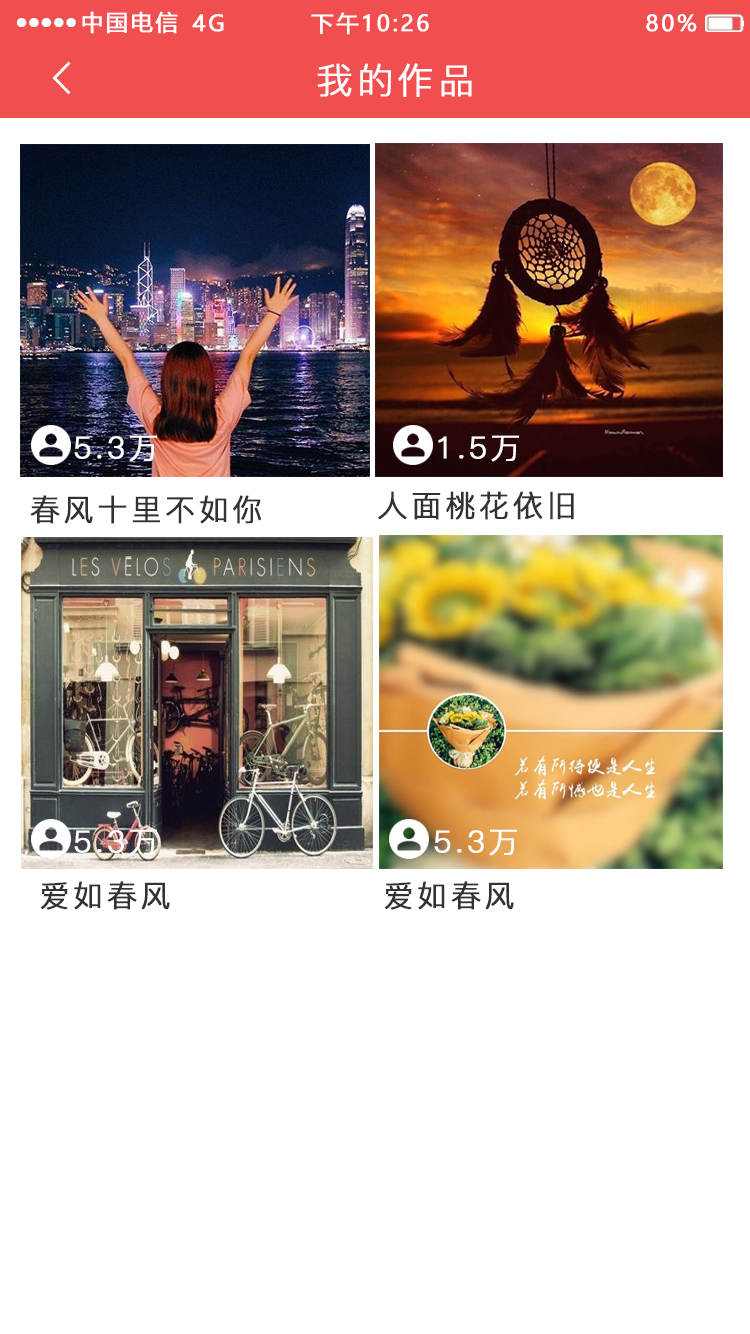
<style>
.page{position:relative;width:750px;height:1334px;background:#ffffff}
.page>*{position:absolute;margin:0}
.t1{font:22px "MicrosoftYaHei";letter-spacing:0.1em;color:#ffffff;text-transform:uppercase;font-weight:bold}
.t2{font:36px "PingFang-SC-Regular";letter-spacing:0.1em;color:#ffffff;text-transform:uppercase;font-weight:bold}
.t3{font:30px "PingFang-SC-Regular";letter-spacing:0.1em;color:#ffffff;text-transform:uppercase;font-weight:bold}
.t4{font:30px "PingFang-SC-Regular";letter-spacing:0.1em;color:#323233;text-transform:uppercase;font-weight:bold}
</style>
<div class="page">
<p class="t1" style="left:82px;top:11px;width:96px;height:23px">中国电信</p>
<p class="t1" style="left:192px;top:14px;width:32px;height:18px">4G</p>
<p class="t1" style="left:311px;top:12px;width:118px;height:23px">下午10:26</p>
<p class="t1" style="left:646px;top:14px;width:51px;height:18px">80%</p>
<p class="t2" style="left:317px;top:63px;width:155px;height:34px">我的作品</p>
<p class="t3" style="left:74px;top:435px;width:83px;height:27px">5.3万</p>
<p class="t3" style="left:438px;top:435px;width:81px;height:27px">1.5万</p>
<p class="t4" style="left:30px;top:495px;width:231px;height:29px">春风十里不如你</p>
<p class="t4" style="left:378px;top:491px;width:196px;height:29px">人面桃花依旧</p>
<p class="t3" style="left:74px;top:829px;width:83px;height:27px">5.3万</p>
<p class="t3" style="left:434px;top:829px;width:83px;height:27px">5.3万</p>
<p class="t4" style="left:41px;top:881px;width:129px;height:29px">爱如春风</p>
<p class="t4" style="left:385px;top:881px;width:129px;height:29px">爱如春风</p>
</div>
